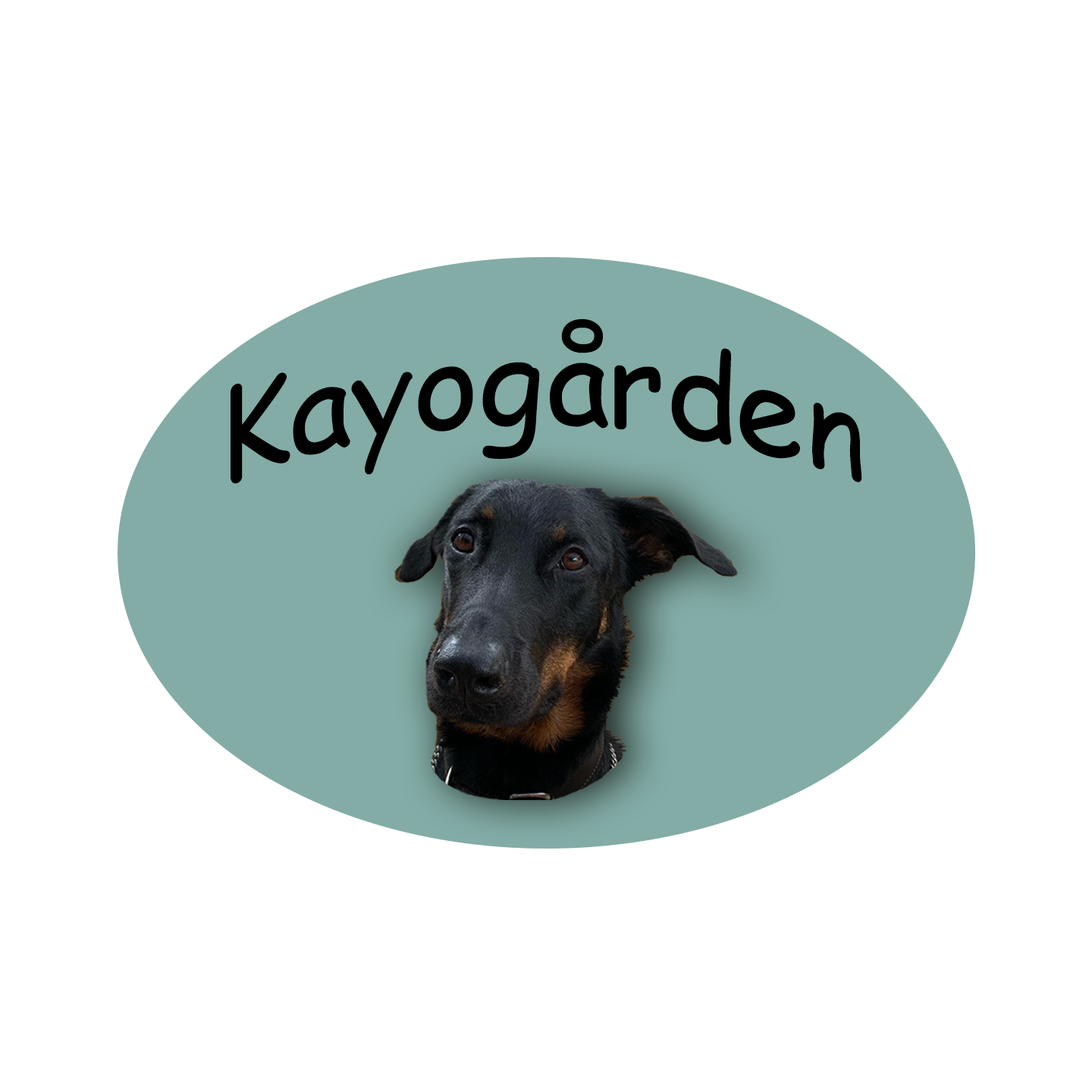
<style>
.page{position:relative;width:1092px;height:1092px;background:#ffffff}
.page>*{position:absolute;margin:0}
.t1{font:121.2px "ComicSansMS";color:#000000}
</style>
<div class="page">
<p class="t1" style="left:231px;top:318px;width:631px;height:166px">Kayogården</p>
</div>
